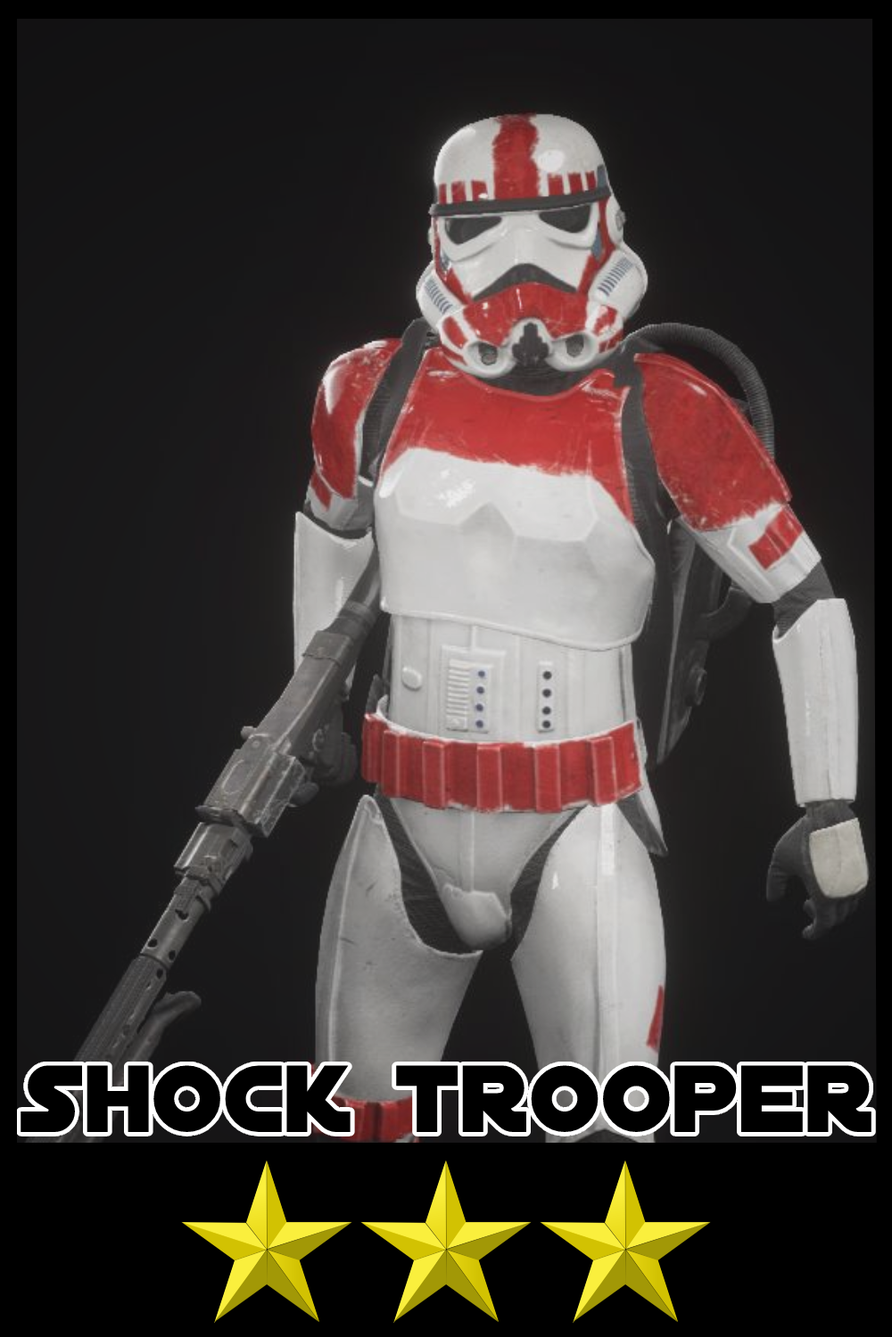
<style>
.page{position:relative;width:892px;height:1337px}
.page>*{position:absolute;margin:0}
.t1{font:102.3px "DistantGalaxy";color:#000000}
</style>
<div class="page">
<p class="t1" style="left:21px;top:1065px;width:850px;height:67px">shock trooper</p>
</div>
